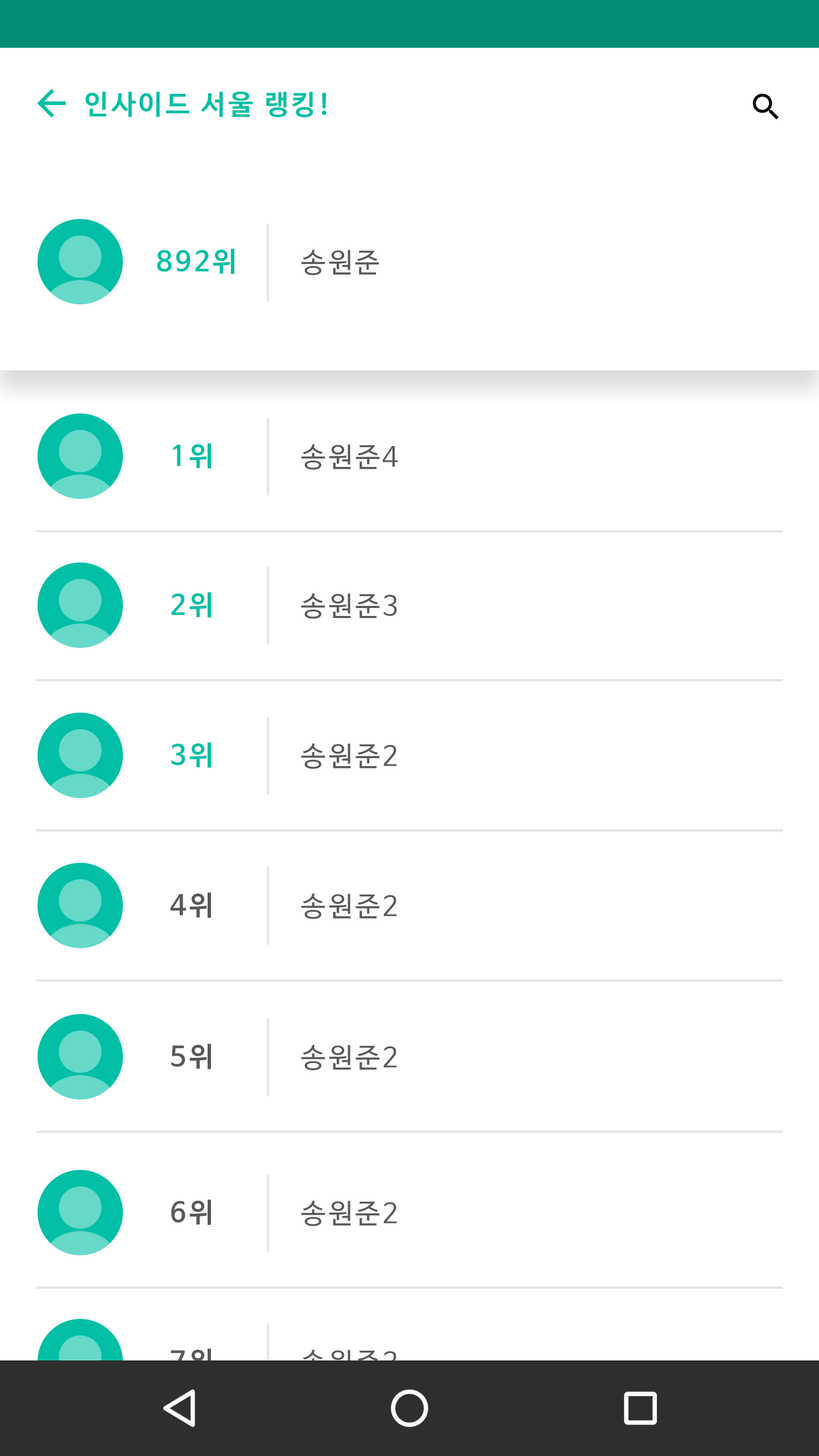
<style>
.page{position:relative;width:819px;height:1456px;background:#ffffff}
.page>*{position:absolute;margin:0}
.t1{font:27.3px "NanumBarunGothicBold";letter-spacing:0.1em;color:#00bfa5}
.t2{font:27.3px "NanumBarunGothic";letter-spacing:0.1em;color:#585858}
.t3{font:27.3px "NanumBarunGothicBold";letter-spacing:0.1em;color:#585858}
</style>
<div class="page">
<p class="t1" style="left:85px;top:92px;width:241px;height:26px">인사이드 서울 랭킹!</p>
<p class="t1" style="left:157px;top:249px;width:77px;height:25px">892위</p>
<p class="t2" style="left:301px;top:250px;width:78px;height:25px">송원준</p>
<p class="t1" style="left:173px;top:443px;width:38px;height:26px">1위</p>
<p class="t2" style="left:301px;top:444px;width:97px;height:26px">송원준4</p>
<p class="t1" style="left:171px;top:592px;width:40px;height:26px">2위</p>
<p class="t2" style="left:301px;top:593px;width:96px;height:26px">송원준3</p>
<p class="t1" style="left:171px;top:742px;width:40px;height:26px">3위</p>
<p class="t2" style="left:301px;top:743px;width:96px;height:26px">송원준2</p>
<p class="t3" style="left:170px;top:892px;width:41px;height:26px">4위</p>
<p class="t2" style="left:301px;top:893px;width:96px;height:26px">송원준2</p>
<p class="t3" style="left:171px;top:1044px;width:40px;height:25px">5위</p>
<p class="t2" style="left:301px;top:1045px;width:96px;height:25px">송원준2</p>
<p class="t3" style="left:171px;top:1199px;width:40px;height:26px">6위</p>
<p class="t2" style="left:301px;top:1201px;width:96px;height:25px">송원준2</p>
</div>
